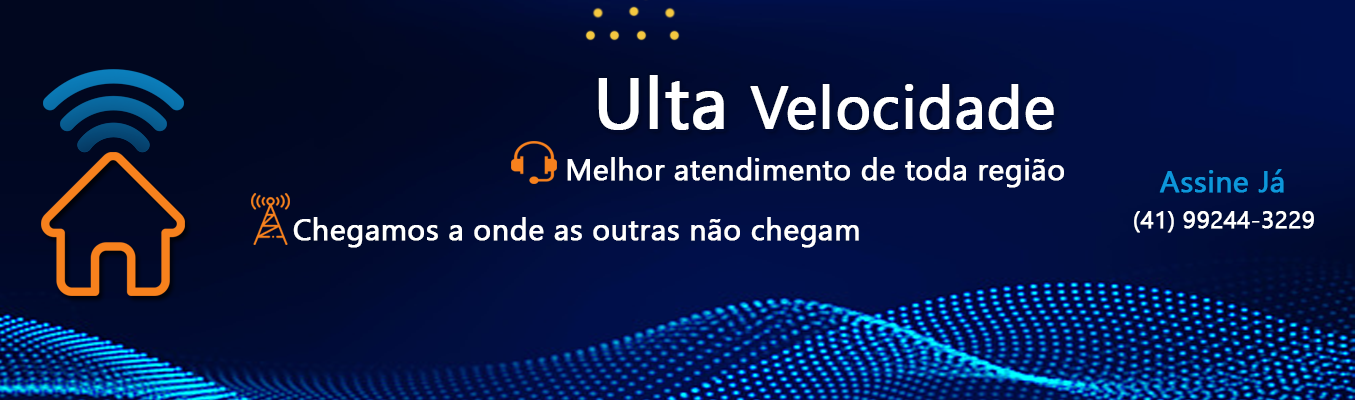
<style>
.page{position:relative;width:1355px;height:400px}
.page>*{position:absolute;margin:0}
.t1{font:60px "NirmalaUI";color:#ffffff;font-weight:bold}
.t2{font:72px "NirmalaUI";color:#ffffff;font-weight:bold}
.t3{font:30px "NirmalaUI";color:#ffffff;font-weight:bold}
.t4{font:30px "NirmalaUI";color:#0d97db;font-weight:bold}
.t5{font:24px "NirmalaUI";color:#ffffff;font-weight:bold}
</style>
<div class="page">
<p class="t1" style="left:598px;top:75px;width:456px;height:55px"><span class="t2">Ulta </span>Velocidade</p>
<p class="t3" style="left:567px;top:157px;width:497px;height:31px">Melhor atendimento de toda região</p>
<p class="t4" style="left:1159px;top:169px;width:125px;height:24px">Assine Já</p>
<p class="t3" style="left:293px;top:217px;width:566px;height:31px">Chegamos a onde as outras não chegam</p>
<p class="t5" style="left:1134px;top:211px;width:180px;height:22px">99244-3229 (41)</p>
</div>
